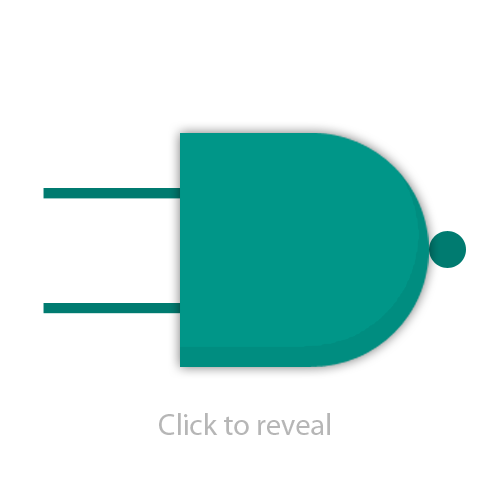
<style>
.page{position:relative;width:500px;height:500px;background:#ffffff}
.page>*{position:absolute;margin:0}
.t1{font:30px "MyriadPro-Regular";color:#b6b6b6}
</style>
<div class="page">
<p class="t1" style="left:159px;top:413px;width:171px;height:22px">Click to reveal</p>
</div>
